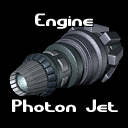
<style>
.page{position:relative;width:128px;height:128px;background:#000000}
.page>*{position:absolute;margin:0}
.t1{font:18px "GravitateBRK";color:#ffffff}
</style>
<div class="page">
<p class="t1" style="left:35px;top:13px;width:58px;height:16px">Engine</p>
<p class="t1" style="left:12px;top:99px;width:106px;height:13px">Photon Jet</p>
</div>
